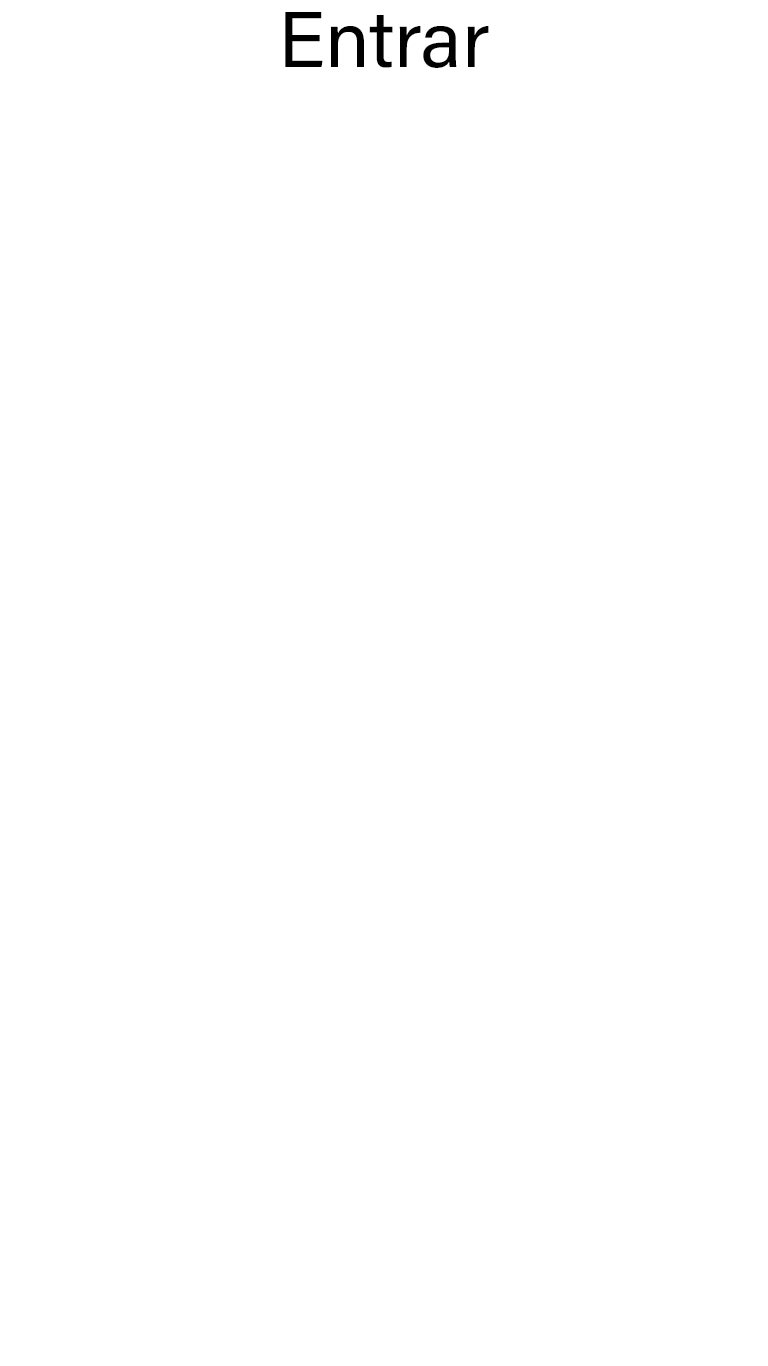
<style>
.page{position:relative;width:768px;height:1366px;background:#ffffff}
.page>*{position:absolute;margin:0}
.t1{font:79.2px "AcuminConcept-Regular";color:#000000}
</style>
<div class="page">
<p class="t1" style="left:285px;top:12px;width:204px;height:56px">Entrar</p>
</div>
